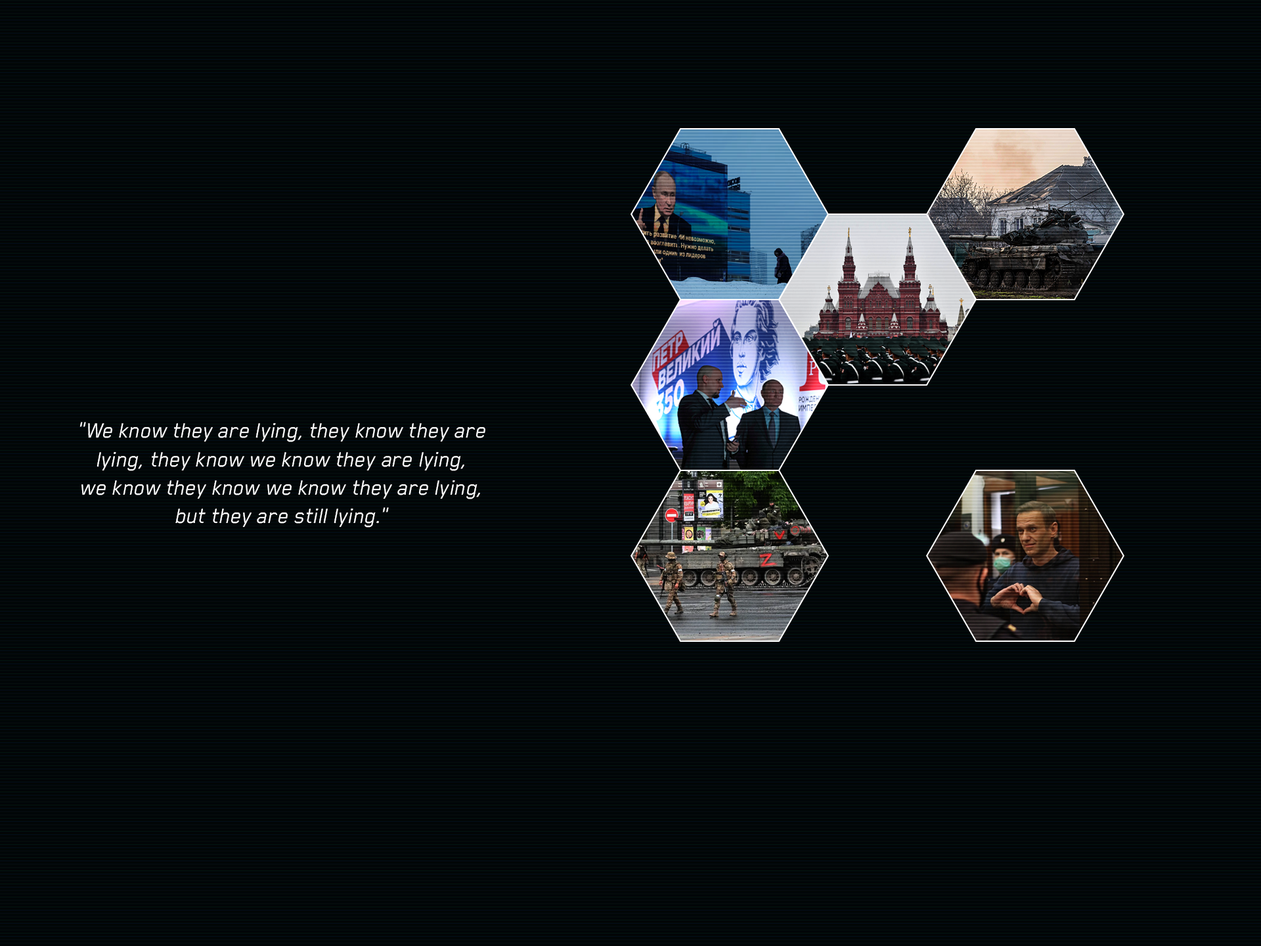
<style>
.page{position:relative;width:1261px;height:946px}
.page>*{position:absolute;margin:0}
.t1{font:23.6px "BlenderPro-BookItalic";color:#ffffff}
</style>
<div class="page">
<p class="t1" style="left:79px;top:422px;width:406px;height:105px;text-align:center">"We know they are lying, they know they are<br>lying, they know we know they are lying,<br>we know they know we know they are lying,<br>but they are still lying."</p>
</div>
